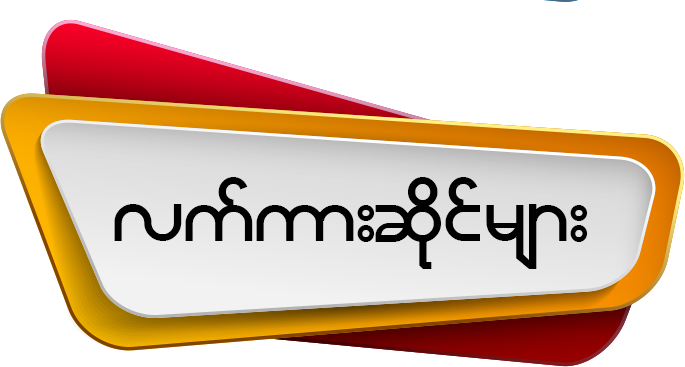
<style>
.page{position:relative;width:685px;height:367px;background:#ffffff}
.page>*{position:absolute;margin:0}
.t1{font:92.2px "NyiElephant";color:#000000}
</style>
<div class="page">
<p class="t1" style="left:114px;top:177px;width:474px;height:92px">vufum;qkdifrsm;</p>
</div>
